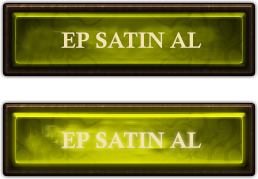
<style>
.page{position:relative;width:258px;height:179px}
.page>*{position:absolute;margin:0}
.t1{font:22px "CalisMTBol";color:#f2e4b2}
</style>
<div class="page">
<p class="t1" style="left:61px;top:32px;width:141px;height:16px">EP SATIN AL</p>
<p class="t1" style="left:61px;top:132px;width:141px;height:16px">EP SATIN AL</p>
</div>
